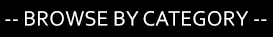
<style>
.page{position:relative;width:273px;height:37px;background:#000000}
.page>*{position:absolute;margin:0}
.t1{font:37.5px "Corbel";color:#ffffff}
</style>
<div class="page">
<p class="t1" style="left:5px;top:11px;width:262px;height:15px">-- BROWSE BY CATEGORY --</p>
</div>
